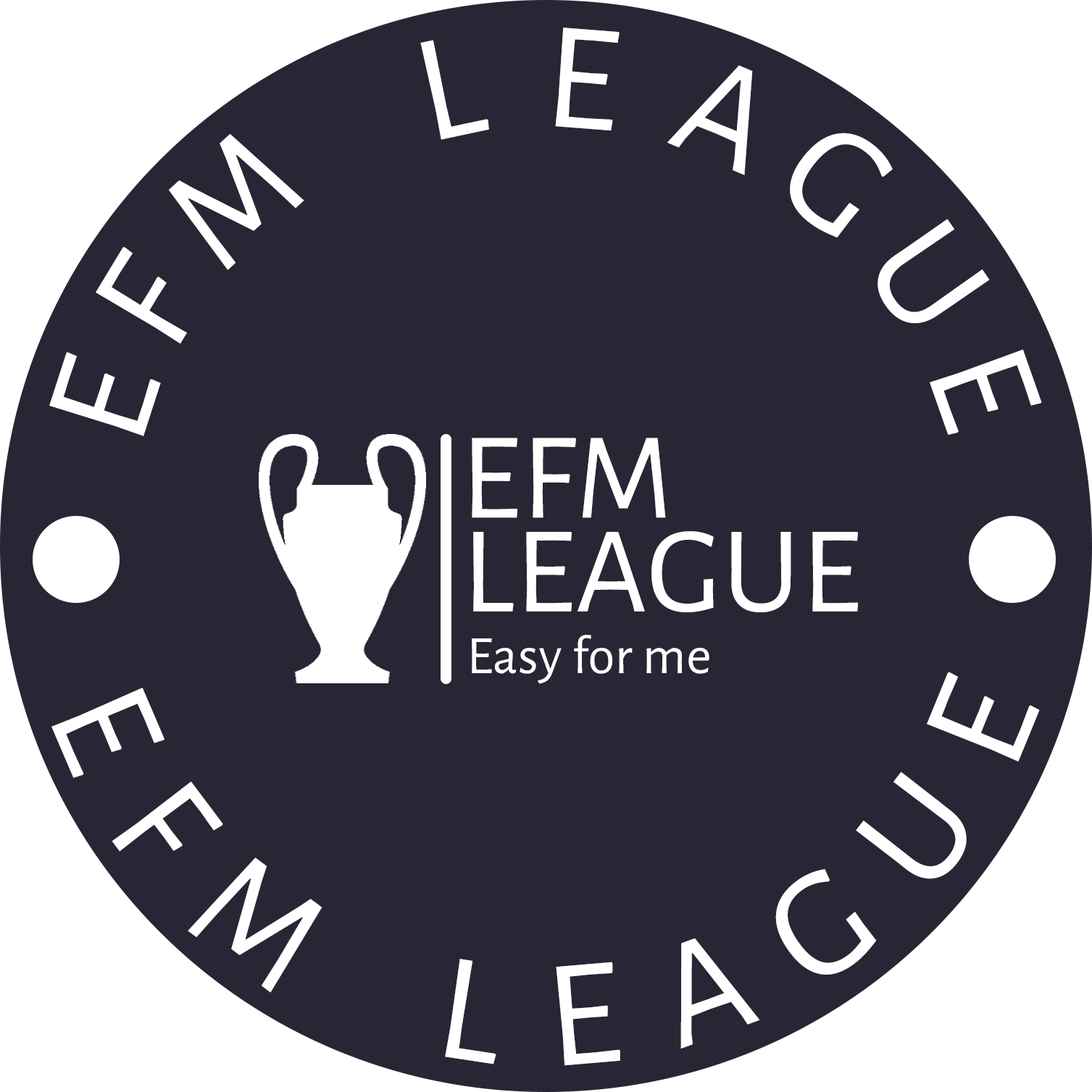
<style>
.page{position:relative;width:1092px;height:1092px;background:#282634}
.page>*{position:absolute;margin:0}
.t1{font:154px "AlegreyaSans-Regular";color:#ffffff}
.t2{font:151px "AlegreyaSans-Regular";letter-spacing:0.01em;color:#ffffff}
.t3{font:123.8px "AlegreyaSans-Regular";letter-spacing:0.01em;color:#ffffff}
.t4{font:54.3px "AlegreyaSans-Regular";letter-spacing:0.01em;color:#ffffff}
.t5{font:154px "AlegreyaSans-Regular";letter-spacing:0.01em;color:#ffffff}
</style>
<div class="page">
<p class="t1" style="left:49px;top:28px;width:993px;height:408px;text-align:center"><span class="t2">               </span>E F M     L  E  A G U E</p>
<p class="t3" style="left:472px;top:438px;width:194px;height:80px">EFM</p>
<p class="t3" style="left:473px;top:531px;width:386px;height:81px">LEAGUE</p>
<p class="t4" style="left:472px;top:635px;width:237px;height:49px">Easy for me</p>
<p class="t5" style="left:51px;top:672px;width:989px;height:394px;text-align:center">E  F  M      L  E  A  G  U  E</p>
</div>
